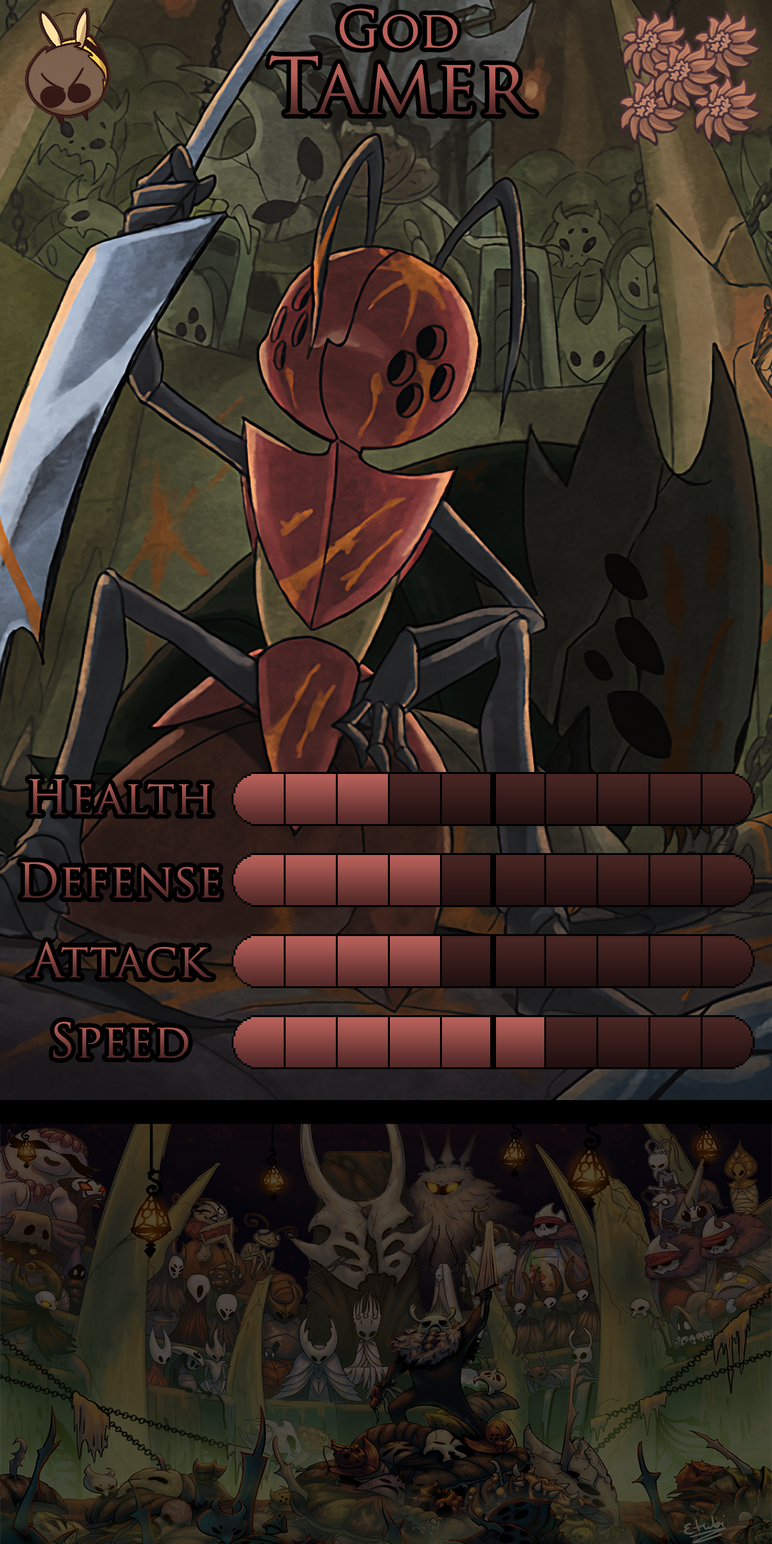
<style>
.page{position:relative;width:772px;height:1544px}
.page>*{position:absolute;margin:0}
.t1{font:76.6px/66.6px "TrajanPro-Regular"}
.t2{font:50.4px/66.6px "TrajanPro-Regular"}
.t3{font:79.8px "TrajanPro-Regular"}
</style>
<div class="page">
<p class="t1" style="left:269px;top:8px;width:266px;height:107px;text-align:center"><span class="t2">God<br></span>Tamer</p>
<p class="t3" style="left:29px;top:779px;width:183px;height:36px">Health</p>
<p class="t3" style="left:21px;top:862px;width:199px;height:36px">Defense</p>
<p class="t3" style="left:29px;top:941px;width:183px;height:38px">Attack</p>
<p class="t3" style="left:53px;top:1022px;width:136px;height:36px">Speed</p>
</div>
